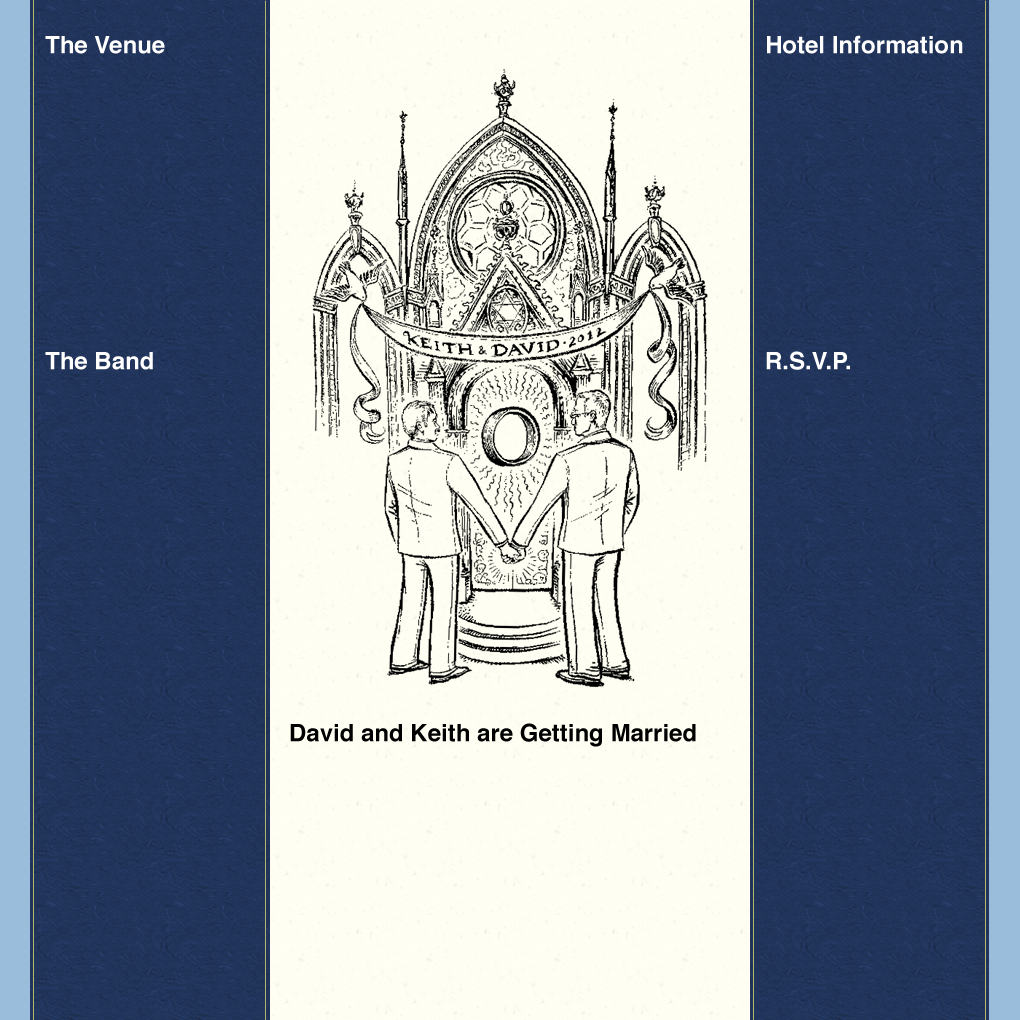
<style>
.page{position:relative;width:1020px;height:1020px}
.page>*{position:absolute;margin:0}
.t1{font:24px "Helvetica-Bold";color:#ffffff}
.t2{font:24px "Helvetica-Bold";color:#000000}
</style>
<div class="page">
<p class="t1" style="left:45px;top:36px;width:120px;height:18px">The Venue</p>
<p class="t1" style="left:767px;top:35px;width:196px;height:19px">Hotel Information</p>
<p class="t1" style="left:45px;top:352px;width:108px;height:18px">The Band</p>
<p class="t1" style="left:766px;top:351px;width:84px;height:19px">R.S.V.P.</p>
<p class="t2" style="left:290px;top:723px;width:406px;height:24px">David and Keith are Getting Married</p>
</div>
